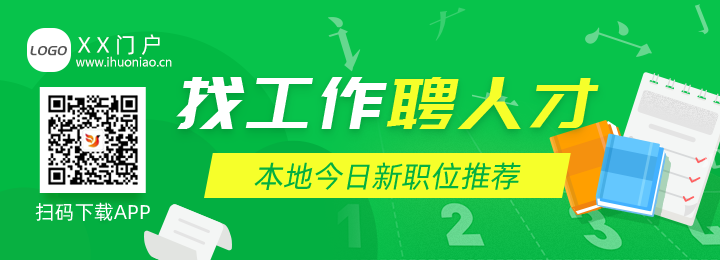
<style>
.page{position:relative;width:720px;height:260px;background:#07c34b}
.page>*{position:absolute;margin:0}
.t1{font:22px "AlibabaPuHuiTi-Regular";letter-spacing:0.24em;color:#ffffff}
.t2{font:14px "PangMenZhengDao";color:#555555;text-transform:uppercase;font-style:italic}
.t3{font:12px "MicrosoftYaHei";color:#ffffff}
.t4{font:72px "PangMenZhengDao";letter-spacing:0.05em;color:#ffffff;font-style:italic}
.t5{font:72px "PangMenZhengDao";letter-spacing:0.05em;color:#f6ff2a;font-style:italic}
.t6{font:30px "AlibabaPuHuiTiR";color:#03af41;font-style:italic}
.t7{font:20px "AlibabaPuHuiTiR";color:#ffffff}
</style>
<div class="page">
<p class="t1" style="left:78px;top:34px;width:82px;height:21px">XX门户</p>
<p class="t2" style="left:30px;top:46px;width:37px;height:10px">logo</p>
<p class="t3" style="left:76px;top:56px;width:96px;height:11px">www.ihuoniao.cn</p>
<p class="t4" style="left:176px;top:77px;width:423px;height:52px">找工作<span class="t5">聘人才</span></p>
<p class="t6" style="left:254px;top:162px;width:267px;height:28px">本地今日新职位推荐</p>
<p class="t7" style="left:35px;top:202px;width:115px;height:19px">扫码下载APP</p>
</div>
